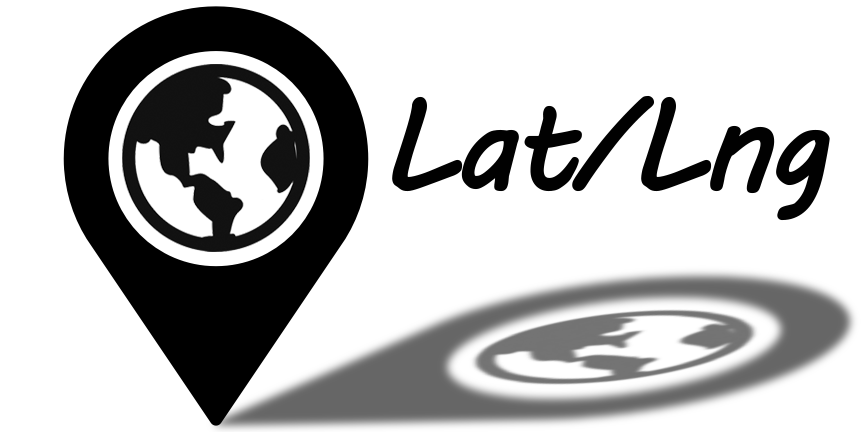
<style>
.page{position:relative;width:864px;height:432px;background:#ffffff}
.page>*{position:absolute;margin:0}
.t1{font:130px "MVBoli";letter-spacing:-0.05em;color:#010101;font-weight:bold}
</style>
<div class="page">
<p class="t1" style="left:392px;top:95px;width:438px;height:126px">Lat/Lng</p>
</div>
